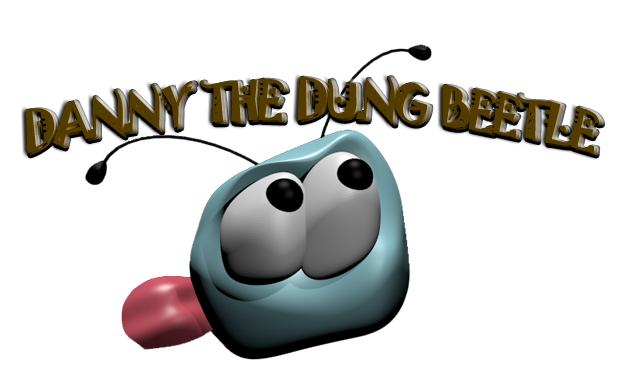
<style>
.page{position:relative;width:621px;height:366px;background:#ffffff}
.page>*{position:absolute;margin:0}
.t1{font:48px "Jokerman-Regular";letter-spacing:-0.1em;color:#543c01}
</style>
<div class="page">
<p class="t1" style="left:25px;top:76px;width:575px;height:78px">DANNY  THE  DUNG  BEETLE</p>
<p class="t1" style="left:28px;top:78px;width:575px;height:78px">DANNY  THE  DUNG  BEETLE</p>
</div>
